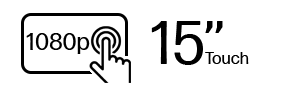
<style>
.page{position:relative;width:296px;height:86px;background:#ffffff}
.page>*{position:absolute;margin:0}
.t1{font:60px "FormaDJRMicro-Regular";color:#000000}
.t2{font:24px "FormaDJRMicro-Regular";color:#000000}
.t3{font:17px "FormaDJRMicro-Regular";color:#000000}
</style>
<div class="page">
<p class="t1" style="left:151px;top:21px;width:72px;height:44px">15’’</p>
<p class="t2" style="left:26px;top:33px;width:64px;height:21px">1080p</p>
<p class="t3" style="left:205px;top:52px;width:44px;height:12px">Touch</p>
</div>
